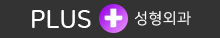
<style>
.page{position:relative;width:220px;height:38px;background:#333333}
.page>*{position:absolute;margin:0}
.t1{font:25px "NanumSquareRoundB";color:#ffffff}
.t2{font:30px "TmonMonsoriBlack";letter-spacing:0.04em;color:#ffffff}
.t3{font:15px "NanumSquareR";letter-spacing:0.04em;color:#ffffff}
</style>
<div class="page">
<p class="t1" style="left:32px;top:10px;width:59px;height:18px">PLUS</p>
<p class="t2" style="left:104px;top:8px;width:19px;height:20px">+</p>
<p class="t3" style="left:134px;top:11px;width:57px;height:15px">성형외과</p>
</div>
